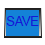
<style>
.page{position:relative;width:45px;height:45px;background:#ffffff}
.page>*{position:absolute;margin:0}
.t1{font:12.5px "ArialMT";color:#1419d7}
</style>
<div class="page">
<p class="t1" style="left:6px;top:16px;width:33px;height:10px">SAVE</p>
</div>
